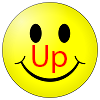
<style>
.page{position:relative;width:100px;height:100px;background:#ffffff}
.page>*{position:absolute;margin:0}
.t1{font:32px "MyriadPro-Regular";color:#ff0000}
</style>
<div class="page">
<p class="t1" style="left:32px;top:45px;width:35px;height:28px">Up</p>
</div>
